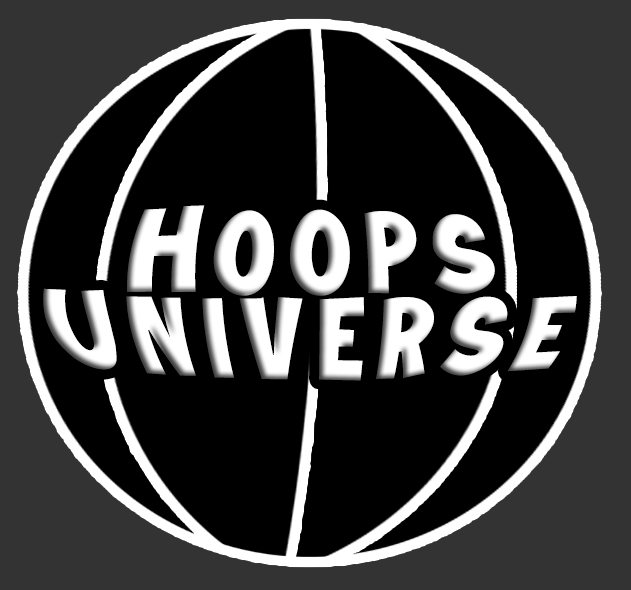
<style>
.page{position:relative;width:631px;height:590px;background:#000000}
.page>*{position:absolute;margin:0}
.t1{font:110px/73.5px "JungleAdventurerRegular";letter-spacing:0.1em;color:#ffffff}
</style>
<div class="page">
<p class="t1" style="left:43px;top:205px;width:534px;height:176px;text-align:center">Hoops<br>Universe</p>
</div>
